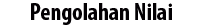
<style>
.page{position:relative;width:203px;height:27px;background:#ffffff}
.page>*{position:absolute;margin:0}
.t1{font:24px "MyriadPro-BoldCond";color:#030003}
</style>
<div class="page">
<p class="t1" style="left:31px;top:3px;width:141px;height:22px">Pengolahan Nilai</p>
</div>
